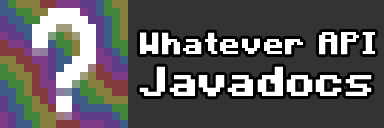
<style>
.page{position:relative;width:384px;height:128px;background:#333333}
.page>*{position:absolute;margin:0}
.t1{font:31px "Minecraft-Bold";color:#ffffff}
.t2{font:41.9px "Minecraft-Bold";color:#ffffff}
</style>
<div class="page">
<p class="t1" style="left:140px;top:32px;width:235px;height:23px">Whatever API</p>
<p class="t2" style="left:139px;top:66px;width:233px;height:31px">Javadocs</p>
</div>
